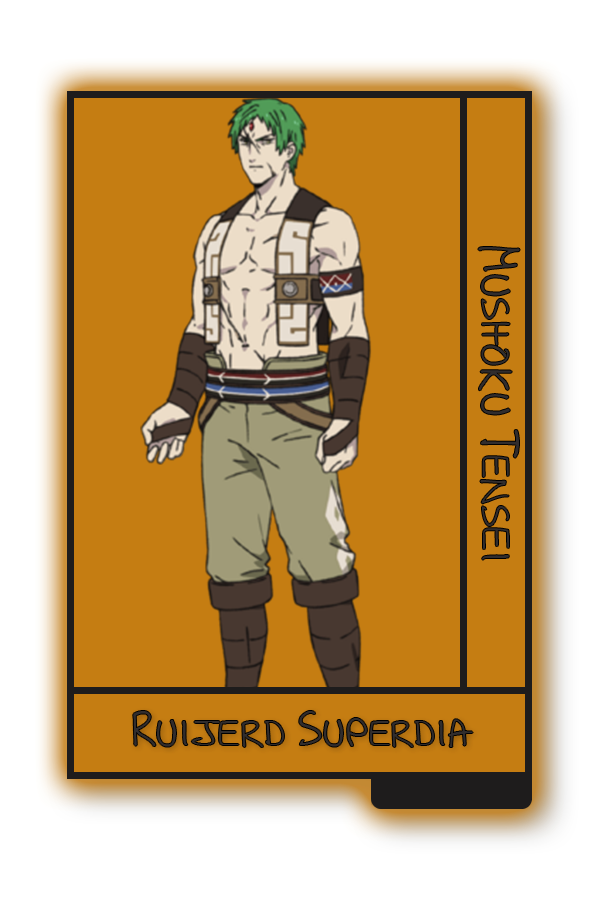
<style>
.page{position:relative;width:600px;height:900px;background:#c57d12}
.page>*{position:absolute;margin:0}
.t1{font:41px "AllCaps";color:#312d2d}
.t2{font:38.3px "AllCaps";color:#312d2d}
</style>
<div class="page">
<p class="t1" style="left:478px;top:247px;width:42px;height:313px;rotate:90deg">Mushoku Tensei</p>
<p class="t2" style="left:133px;top:711px;width:340px;height:36px">Ruijerd Superdia</p>
</div>
